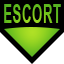
<style>
.page{position:relative;width:64px;height:64px;background:#000000}
.page>*{position:absolute;margin:0}
.t1{font:26.2px "ArialNarrow-Bold";letter-spacing:0.05em;color:#66bd1d;scale:0.6 1}
</style>
<div class="page">
<p class="t1" style="left:4px;top:4px;width:57px;height:19px">ESCORT</p>
</div>
